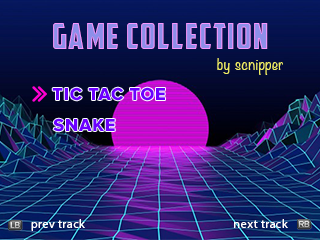
<style>
.page{position:relative;width:320px;height:240px}
.page>*{position:absolute;margin:0}
.t1{font:36px "AmericanCaptain";letter-spacing:0.04em;color:#8d8fe9}
.t2{font:14px "Noteworthy-Light";letter-spacing:0.04em;color:#f1ef66}
.t3{font:18px "ProximaNova-Extrabld";letter-spacing:0.04em;color:#6c00ff}
.t4{font:12px "MyriadPro-Regular";letter-spacing:0.04em;color:#ffffff}
</style>
<div class="page">
<p class="t1" style="left:53px;top:23px;width:215px;height:26px">GAME COLLECTION</p>
<p class="t2" style="left:217px;top:58px;width:66px;height:17px">by scnipper</p>
<p class="t3" style="left:52px;top:87px;width:113px;height:14px">TIC TAC TOE</p>
<p class="t3" style="left:53px;top:118px;width:62px;height:14px">SNAKE</p>
<p class="t4" style="left:31px;top:219px;width:54px;height:12px">prev track</p>
<p class="t4" style="left:234px;top:219px;width:54px;height:9px">next track</p>
</div>
